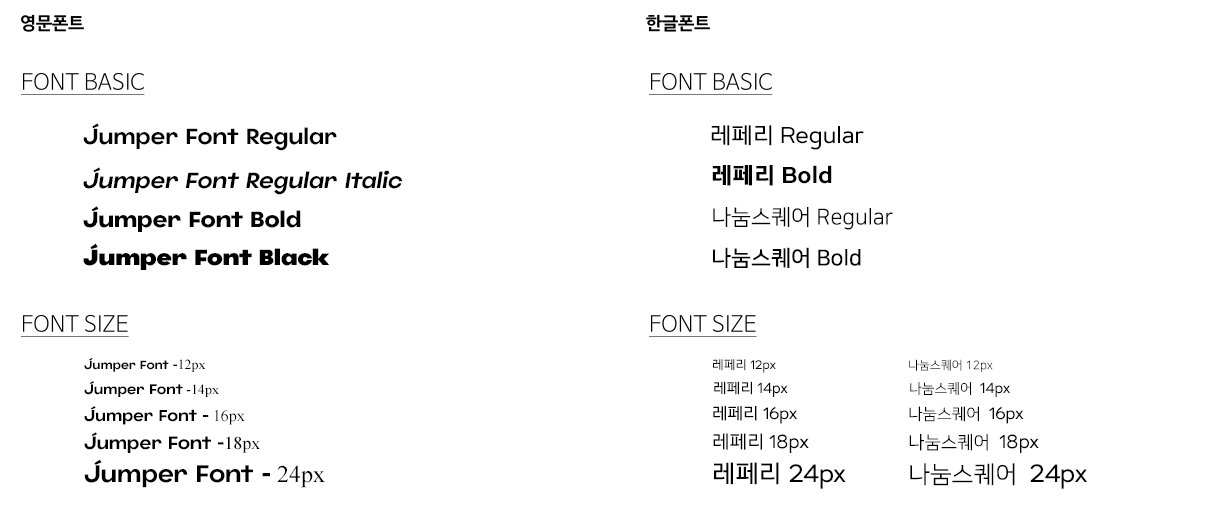
<style>
.page{position:relative;width:1228px;height:520px;background:#ffffff}
.page>*{position:absolute;margin:0}
.t1{font:22px "JumperPERSONALUSEONLY-Regular";color:#000000}
.t2{font:22px "LeferiBaseType-Regular";color:#000000}
.t3{font:22px "JumperPERSONALUSEONLY-RegularItalic";color:#000000}
.t4{font:22px "LeferiBaseType-Bold";color:#000000}
.t5{font:22px "JumperPERSONALUSEONLY-Bold";color:#000000}
.t6{font:22px "NanumSquareR";color:#000000}
.t7{font:22px "JumperPERSONALUSEONLY-Black";color:#000000}
.t8{font:22px "NanumSquareB";color:#000000}
.t9{font:12px "JumperPERSONALUSEONLY-Regular";color:#000000}
.t10{font:14px "TimesNewRomanPSMT";color:#000000}
.t11{font:12px "LeferiBaseType-Regular";color:#000000}
.t12{font:12px "NanumSquareR";color:#000000}
.t13{font:14px "JumperPERSONALUSEONLY-Regular";color:#000000}
.t14{font:14px "LeferiBaseType-Regular";color:#000000}
.t15{font:14px "NanumSquareR";color:#000000}
.t16{font:16px "JumperPERSONALUSEONLY-Regular";color:#000000}
.t17{font:16px "TimesNewRomanPSMT";color:#000000}
.t18{font:16px "LeferiBaseType-Regular";color:#000000}
.t19{font:16px "NanumSquareR";color:#000000}
.t20{font:18px "JumperPERSONALUSEONLY-Regular";color:#000000}
.t21{font:18px "TimesNewRomanPSMT";color:#000000}
.t22{font:18px "LeferiBaseType-Regular";color:#000000}
.t23{font:18px "NanumSquareR";color:#000000}
.t24{font:24px "JumperPERSONALUSEONLY-Regular";color:#000000}
.t25{font:24px "TimesNewRomanPSMT";color:#000000}
.t26{font:24px "LeferiBaseType-Regular";color:#000000}
.t27{font:24px "NanumSquareR";color:#000000}
</style>
<div class="page">
<p class="t1" style="left:83px;top:123px;width:254px;height:28px">Jumper Font Regular</p>
<p class="t2" style="left:711px;top:125px;width:153px;height:25px">레페리 Regular</p>
<p class="t3" style="left:83px;top:167px;width:319px;height:28px">Jumper Font Regular Italic</p>
<p class="t4" style="left:712px;top:165px;width:120px;height:21px">레페리 Bold</p>
<p class="t5" style="left:83px;top:206px;width:218px;height:26px">Jumper Font Bold</p>
<p class="t6" style="left:713px;top:207px;width:180px;height:23px">나눔스퀘어 Regular</p>
<p class="t7" style="left:83px;top:243px;width:247px;height:27px">Jumper Font Black</p>
<p class="t8" style="left:713px;top:247px;width:148px;height:21px">나눔스퀘어 Bold</p>
<p class="t9" style="left:84px;top:358px;width:122px;height:14px">Jumper Font -<span class="t10">12px</span></p>
<p class="t11" style="left:713px;top:359px;width:63px;height:14px">레페리 12px</p>
<p class="t12" style="left:909px;top:359px;width:84px;height:13px">나눔스퀘어 12px</p>
<p class="t13" style="left:84px;top:381px;width:135px;height:16px">Jumper Font<span class="t10"> -14px</span></p>
<p class="t14" style="left:714px;top:381px;width:74px;height:16px">레페리 14px</p>
<p class="t15" style="left:910px;top:382px;width:100px;height:15px">나눔스퀘어 <span class="t14"> 14px</span></p>
<p class="t16" style="left:84px;top:406px;width:161px;height:19px">Jumper Font -<span class="t17"> 16px</span></p>
<p class="t18" style="left:713px;top:406px;width:85px;height:18px">레페리 16px</p>
<p class="t19" style="left:909px;top:406px;width:115px;height:18px">나눔스퀘어 <span class="t18"> 16px</span></p>
<p class="t20" style="left:84px;top:432px;width:176px;height:21px">Jumper Font -<span class="t21">18px</span></p>
<p class="t22" style="left:713px;top:433px;width:96px;height:20px">레페리 18px</p>
<p class="t23" style="left:909px;top:434px;width:130px;height:19px">나눔스퀘어 <span class="t22"> 18px</span></p>
<p class="t24" style="left:84px;top:459px;width:241px;height:29px">Jumper Font -<span class="t25"> 24px</span></p>
<p class="t26" style="left:714px;top:462px;width:132px;height:27px">레페리 24px</p>
<p class="t27" style="left:910px;top:463px;width:178px;height:26px">나눔스퀘어 <span class="t26"> 24px</span></p>
</div>
